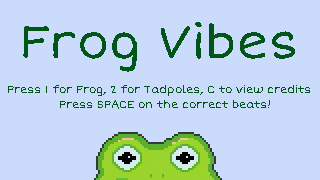
<style>
.page{position:relative;width:320px;height:180px;background:#cbdbfc}
.page>*{position:absolute;margin:0}
.t1{font:48px "ShortStack";color:#005618}
.t2{font:11px "ShortStack";color:#005618}
</style>
<div class="page">
<p class="t1" style="left:23px;top:22px;width:272px;height:50px">Frog Vibes</p>
<p class="t2" style="left:8px;top:85px;width:302px;height:11px">Press 1 for Frog, 2 for Tadpoles, C to view credits</p>
<p class="t2" style="left:60px;top:100px;width:210px;height:9px">Press SPACE on the correct beats!</p>
</div>
